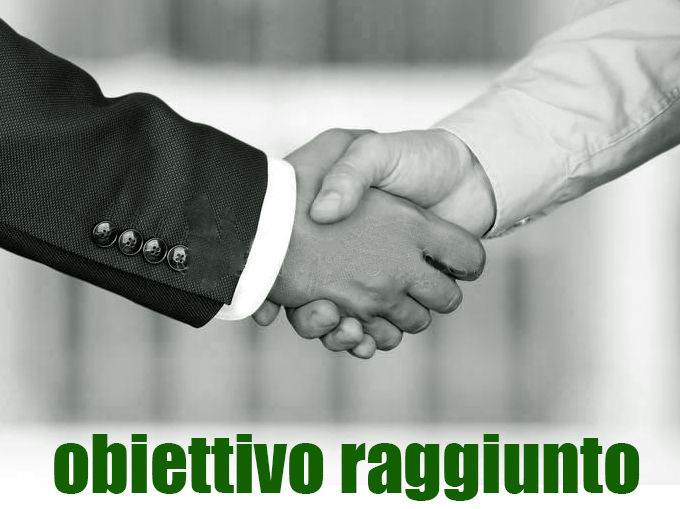
<style>
.page{position:relative;width:680px;height:509px}
.page>*{position:absolute;margin:0}
.t1{font:75px "Impact";color:#126000}
</style>
<div class="page">
<p class="t1" style="left:54px;top:434px;width:586px;height:67px">obiettivo raggiunto</p>
</div>
